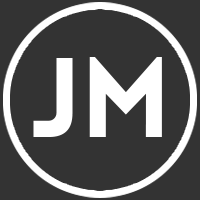
<style>
.page{position:relative;width:200px;height:200px;background:#333333}
.page>*{position:absolute;margin:0}
.t1{font:110px "Lovelo-Black";color:#ffffff}
</style>
<div class="page">
<p class="t1" style="left:33px;top:57px;width:129px;height:80px">JM</p>
</div>
